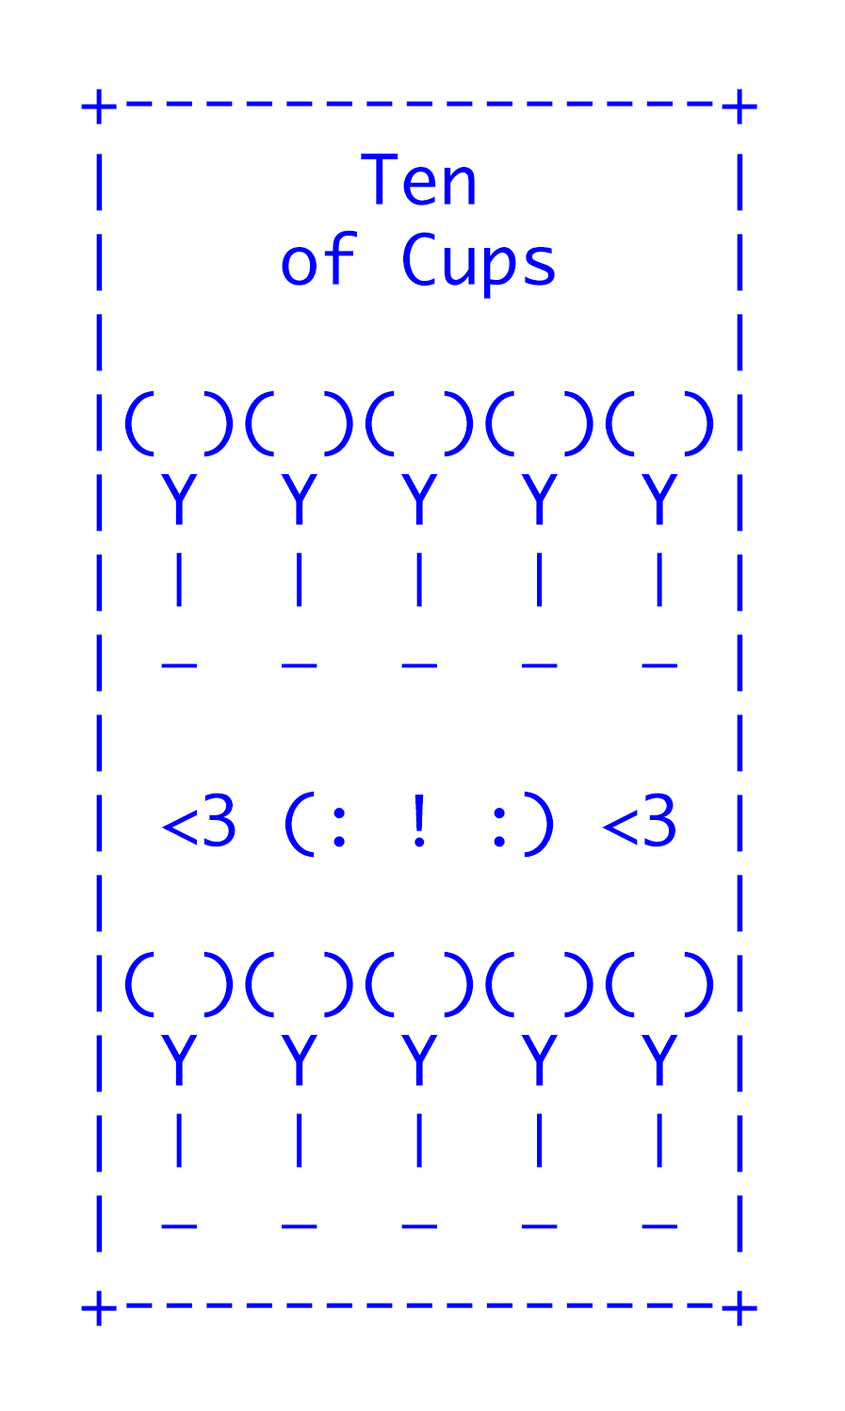
<style>
.page{position:relative;width:845px;height:1411px;background:#ffffff}
.page>*{position:absolute;margin:0}
.t1{font:66.7px "Monaco";color:#0000ff}
</style>
<div class="page">
<p class="t1" style="left:81px;top:89px;width:677px;height:1237px">+---------------+<br>│      Ten      │<br>│    of Cups    │<br>│               │ <br>│( )( )( )( )( )│ <br>│ Y  Y  Y  Y  Y │<br>│ |  |  |  |  | │ <br>│ —  —  —  —  — │<br>│               │ <br>│ &lt;3 (: ! :) &lt;3 │<br>│               │ <br>│( )( )( )( )( )│ <br>│ Y  Y  Y  Y  Y │<br>│ |  |  |  |  | │ <br>│ —  —  —  —  — │<br>+---------------+</p>
</div>
